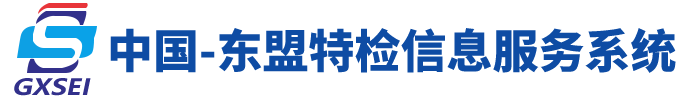
<style>
.page{position:relative;width:680px;height:100px;background:#ffffff}
.page>*{position:absolute;margin:0}
.t1{font:46px "SourceHanSansCN-Heavy";color:#0e4ca4}
.t2{font:22.1px "MicrosoftYaHei-Bold";color:#32308b;font-style:italic;scale:1.18 1}
</style>
<div class="page">
<p class="t1" style="left:110px;top:28px;width:566px;height:45px">中国-东盟特检信息服务系统</p>
<p class="t2" style="left:14px;top:78px;width:77px;height:18px">GXSEI</p>
</div>
